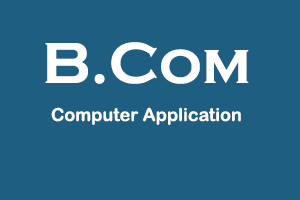
<style>
.page{position:relative;width:300px;height:200px;background:#1e5e80}
.page>*{position:absolute;margin:0}
.t1{font:60px "CopperplateGothic-Bold";color:#ffffff}
.t2{font:18px "ArialRoundedMTBold";color:#ffffff}
</style>
<div class="page">
<p class="t1" style="left:45px;top:42px;width:204px;height:42px">B.Com</p>
<p class="t2" style="left:51px;top:107px;width:190px;height:18px">Computer Application</p>
</div>
